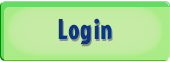
<style>
.page{position:relative;width:170px;height:62px}
.page>*{position:absolute;margin:0}
.t1{font:30px "ImpactaLL";color:#083785}
</style>
<div class="page">
<p class="t1" style="left:58px;top:18px;width:54px;height:27px">Login</p>
</div>
